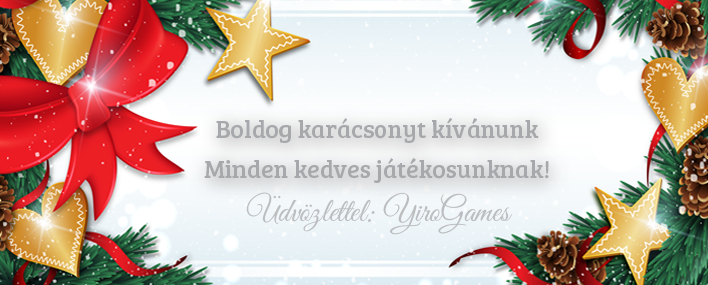
<style>
.page{position:relative;width:708px;height:285px}
.page>*{position:absolute;margin:0}
.t1{font:25px/39.8px "BreeSerif-Regular";color:#a6a8ab}
.t2{font:33.3px "GreatVibes-Regular";color:#bbbdbf}
</style>
<div class="page">
<p class="t1" style="left:204px;top:118px;width:345px;height:65px;text-align:center">Boldog karácsonyt kívánunk<br>Minden kedves játékosunknak!</p>
<p class="t2" style="left:246px;top:192px;width:267px;height:43px">Üdvözlettel: YiroGames</p>
</div>
